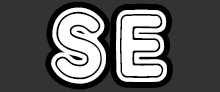
<style>
.page{position:relative;width:220px;height:92px;background:#333333}
.page>*{position:absolute;margin:0}
.t1{font:100px "DokiDokiFantasia";letter-spacing:0.05em;color:#ffffff}
</style>
<div class="page">
<p class="t1" style="left:51px;top:7px;width:116px;height:77px">SE</p>
</div>
